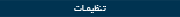
<style>
.page{position:relative;width:180px;height:17px;background:#003351}
.page>*{position:absolute;margin:0}
.t1{font:10px "BYekan";color:#ffffff}
</style>
<div class="page">
<p class="t1" style="left:74px;top:5px;width:32px;height:8px">تنظیمـات</p>
</div>
